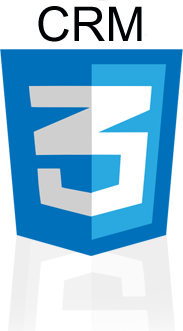
<style>
.page{position:relative;width:183px;height:331px;background:#ffffff}
.page>*{position:absolute;margin:0}
.t1{font:48px "DokChampa";color:#000204}
</style>
<div class="page">
<p class="t1" style="left:38px;top:6px;width:104px;height:36px">CRM</p>
</div>
